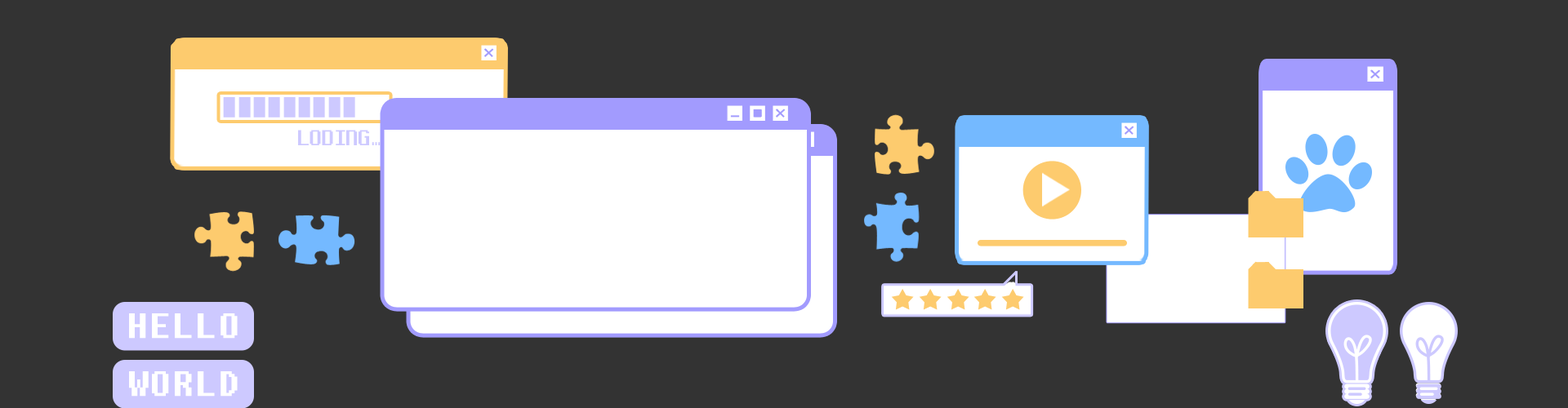
<style>
.page{position:relative;width:1568px;height:408px;background:#333333}
.page>*{position:absolute;margin:0}
.t1{font:24.2px "NeoDunggeunmo-Regular";color:#cdc9ff}
.t2{font:43.5px "DungGeunMo";color:#ffffff;font-weight:bold}
</style>
<div class="page">
<p class="t1" style="left:298px;top:130px;width:83px;height:15px">LODING…</p>
<p class="t2" style="left:129px;top:314px;width:109px;height:25px">HELLO</p>
<p class="t2" style="left:129px;top:372px;width:109px;height:25px">WORLD</p>
</div>
